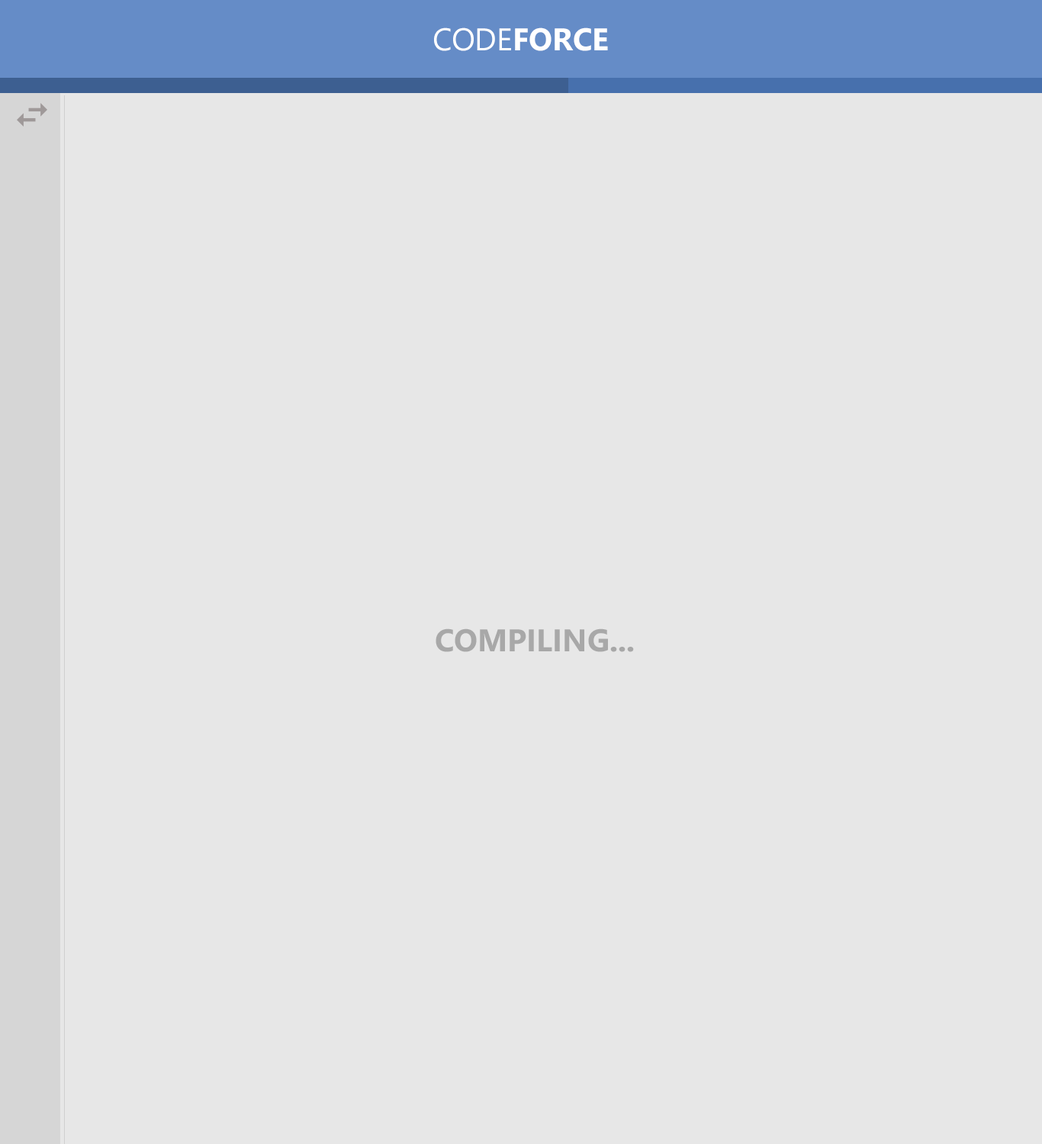
<style>
.page{position:relative;width:1042px;height:1144px;background:#e7e7e7}
.page>*{position:absolute;margin:0}
.t1{font:31.3px "SegoeUI-Bold";color:#ffffff;text-transform:uppercase}
.t2{font:31.3px "SegoeUI";color:#ffffff;text-transform:uppercase}
.t3{font:31.3px "SegoeUI-Bold";color:#a8a8a8;text-transform:uppercase}
</style>
<div class="page">
<p class="t1" style="left:434px;top:27px;width:174px;height:24px"><span class="t2">Code</span>Force</p>
<p class="t3" style="left:436px;top:629px;width:198px;height:23px">Compiling...</p>
</div>
